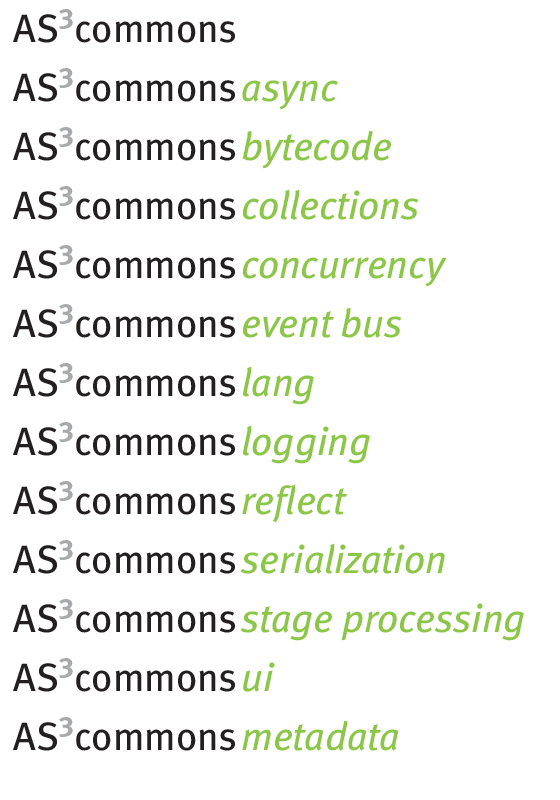
<style>
.page{position:relative;width:560px;height:800px;background:#ffffff}
.page>*{position:absolute;margin:0}
.t1{font:39.7px "MetaBookLF-Roman";color:#231f20}
.t2{font:39.7px "MetaBook-Roman";color:#231f20}
.t3{font:28.9px "Meta-Bold";color:#a7a9ac}
.t4{font:39.7px "MetaBookLF-Roman";letter-spacing:0.1em;color:#231f20}
.t5{font:39.7px "MetaBookLF-Italic";color:#8cc649}
</style>
<div class="page">
<p class="t1" style="left:13px;top:9px;width:222px;height:34px"><span class="t2">AS</span><span class="t3">3</span>common<span class="t4">s</span></p>
<p class="t1" style="left:13px;top:68px;width:325px;height:42px"><span class="t2">AS</span><span class="t3">3</span>common<span class="t4">s</span><span class="t5">async</span></p>
<p class="t5" style="left:13px;top:127px;width:378px;height:42px"><span class="t2">AS</span><span class="t3">3</span><span class="t1">common</span><span class="t4">s</span>bytecode</p>
<p class="t5" style="left:13px;top:186px;width:406px;height:34px"><span class="t2">AS</span><span class="t3">3</span><span class="t1">common</span><span class="t4">s</span>collections</p>
<p class="t5" style="left:13px;top:245px;width:434px;height:42px"><span class="t2">AS</span><span class="t3">3</span><span class="t1">common</span><span class="t4">s</span>concurrency</p>
<p class="t5" style="left:13px;top:304px;width:389px;height:34px"><span class="t2">AS</span><span class="t3">3</span><span class="t1">common</span><span class="t4">s</span>event bus</p>
<p class="t1" style="left:13px;top:363px;width:301px;height:42px"><span class="t2">AS</span><span class="t3">3</span>common<span class="t4">s</span><span class="t5">lang</span></p>
<p class="t5" style="left:13px;top:422px;width:357px;height:42px"><span class="t2">AS</span><span class="t3">3</span><span class="t1">common</span><span class="t4">s</span>logging</p>
<p class="t5" style="left:13px;top:481px;width:334px;height:42px"><span class="t2">AS</span><span class="t3">3</span><span class="t1">common</span><span class="t4">s</span>reflect</p>
<p class="t5" style="left:13px;top:540px;width:432px;height:34px"><span class="t2">AS</span><span class="t3">3</span><span class="t1">common</span><span class="t4">s</span>serialization</p>
<p class="t5" style="left:13px;top:599px;width:511px;height:42px"><span class="t2">AS</span><span class="t3">3</span><span class="t1">common</span><span class="t4">s</span>stage processing</p>
<p class="t1" style="left:13px;top:658px;width:262px;height:34px"><span class="t2">AS</span><span class="t3">3</span>common<span class="t4">s</span><span class="t5">ui</span></p>
<p class="t5" style="left:13px;top:717px;width:386px;height:34px"><span class="t2">AS</span><span class="t3">3</span><span class="t1">common</span><span class="t4">s</span>metadata</p>
</div>
